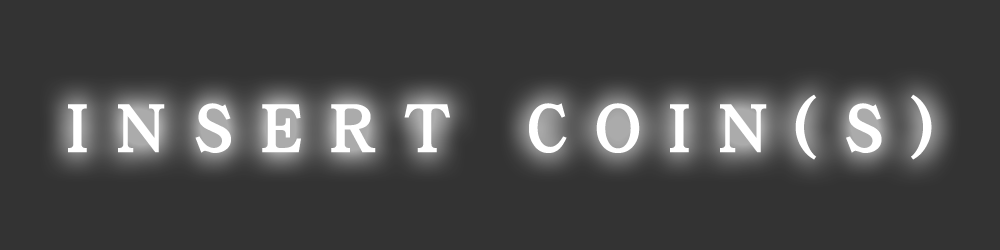
<style>
.page{position:relative;width:1000px;height:250px;background:#333333}
.page>*{position:absolute;margin:0}
.t1{font:72px "DFGanShinKei-W7-WINP-RKSJ-H";letter-spacing:0.35em;color:#ffffff}
</style>
<div class="page">
<p class="t1" style="left:68px;top:94px;width:864px;height:66px">INSERT COIN(S)</p>
</div>
